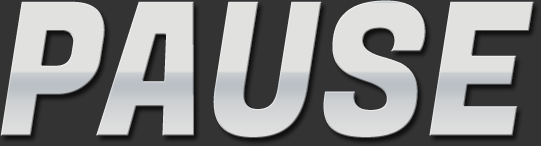
<style>
.page{position:relative;width:541px;height:146px;background:#333333}
.page>*{position:absolute;margin:0}
.t1{font:185.2px "FugazOne-Regular";color:#dfdfdf;scale:0.89 1}
</style>
<div class="page">
<p class="t1" style="left:0px;top:0px;width:534px;height:138px">PAUSE</p>
</div>
